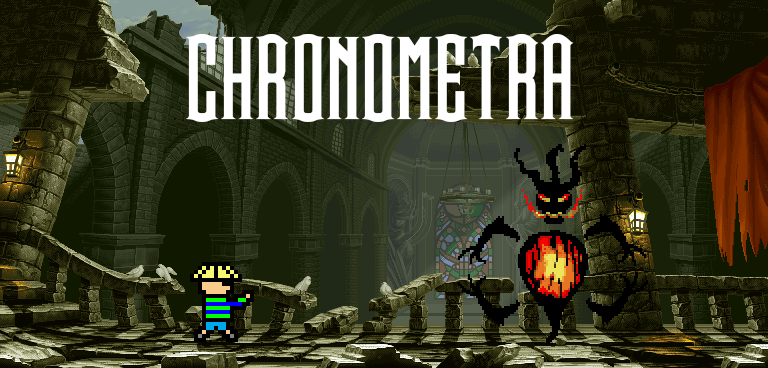
<style>
.page{position:relative;width:768px;height:368px}
.page>*{position:absolute;margin:0}
.t1{font:120px "Steamwreck";color:#ffffff}
</style>
<div class="page">
<p class="t1" style="left:186px;top:34px;width:388px;height:88px">CHRONOMETRA</p>
</div>
